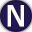
<style>
.page{position:relative;width:32px;height:32px}
.page>*{position:absolute;margin:0}
.t1{font:28.5px "Verdana";letter-spacing:0.05em;color:#ffffff;font-weight:bold}
</style>
<div class="page">
<p class="t1" style="left:7px;top:5px;width:17px;height:22px">N</p>
</div>
